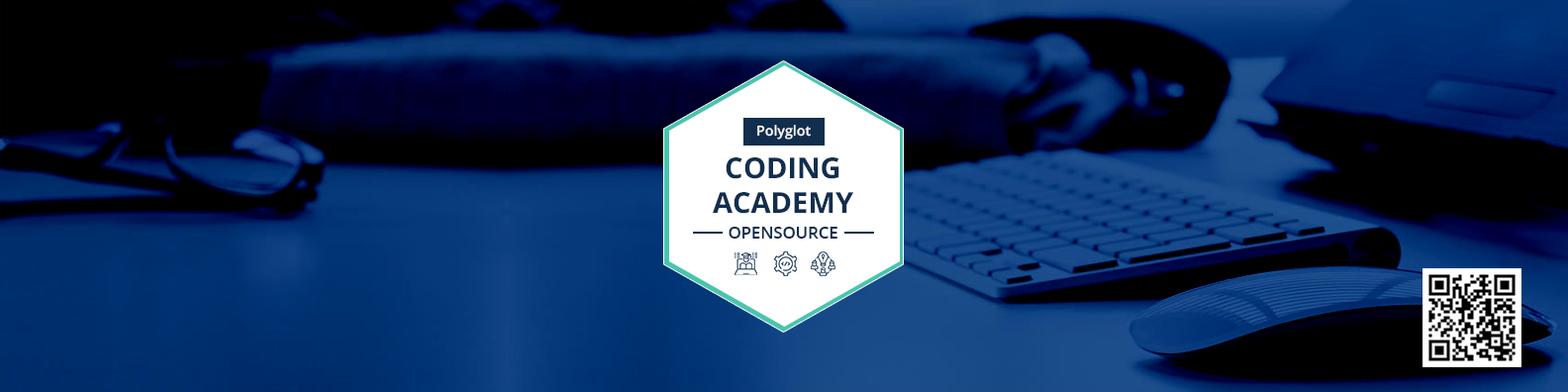
<style>
.page{position:relative;width:1568px;height:392px}
.page>*{position:absolute;margin:0}
.t1{font:13.9px "OpenSans-SemiBold";color:#ffffff}
.t2{font:28.8px "OpenSans-Bold";color:#112e4e}
.t3{font:16.5px "OpenSans-SemiBold";color:#112e4e}
</style>
<div class="page">
<p class="t1" style="left:757px;top:125px;width:54px;height:15px">Polyglot</p>
<p class="t2" style="left:713px;top:157px;width:140px;height:57px;text-align:center">CODING<br>ACADEMY</p>
<p class="t3" style="left:729px;top:227px;width:108px;height:12px">OPENSOURCE</p>
</div>
